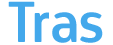
<style>
.page{position:relative;width:113px;height:45px;background:#ffffff}
.page>*{position:absolute;margin:0}
.t1{font:56px "Designosaur";color:#43a8eb}
</style>
<div class="page">
<p class="t1" style="left:8px;top:1px;width:95px;height:42px">Tras</p>
</div>
